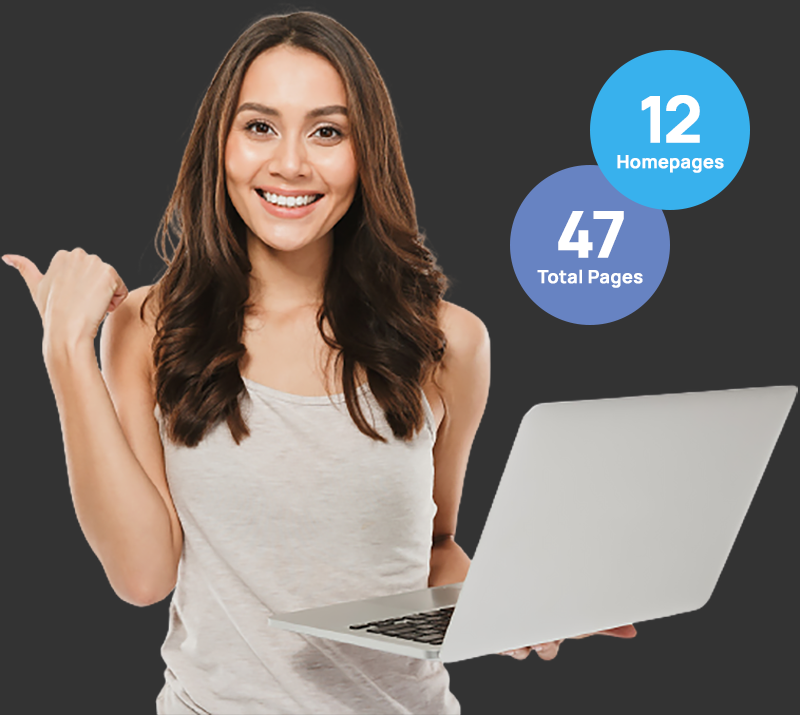
<style>
.page{position:relative;width:800px;height:715px;background:#333333}
.page>*{position:absolute;margin:0}
.t1{font:64px "Manrope-Bold";letter-spacing:-0.075em;color:#ffffff;font-weight:bold}
.t2{font:18px "Manrope-Bold";color:#ffffff;font-weight:bold}
</style>
<div class="page">
<p class="t1" style="left:641px;top:95px;width:59px;height:48px">12</p>
<p class="t2" style="left:617px;top:155px;width:107px;height:18px">Homepages</p>
<p class="t1" style="left:558px;top:211px;width:66px;height:47px">47</p>
<p class="t2" style="left:537px;top:269px;width:106px;height:19px">Total Pages</p>
</div>
